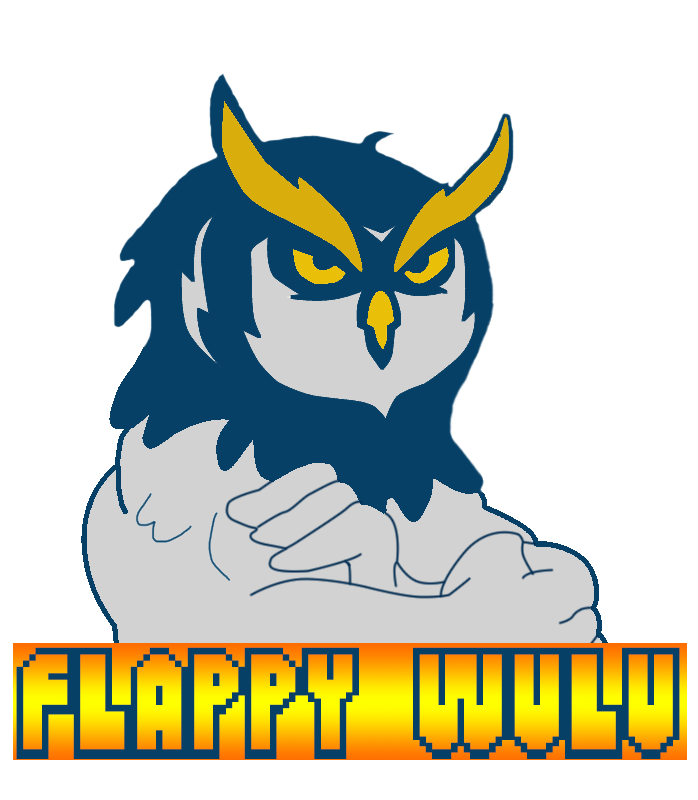
<style>
.page{position:relative;width:698px;height:800px;background:#ffffff}
.page>*{position:absolute;margin:0}
.t1{font:202.7px "FlappyBirdy";color:#064066}
</style>
<div class="page">
<p class="t1" style="left:16px;top:647px;width:664px;height:112px">FLAPPY WULU</p>
</div>
